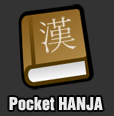
<style>
.page{position:relative;width:114px;height:116px;background:#333333}
.page>*{position:absolute;margin:0}
.t1{font:16px "HelveticaInseratCyr-Upright";color:#ffffff}
</style>
<div class="page">
<p class="t1" style="left:9px;top:97px;width:94px;height:14px">Pocket HANJA</p>
</div>
